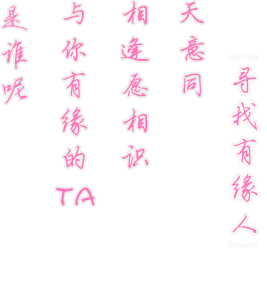
<style>
.page{position:relative;width:267px;height:297px;background:#ffffff}
.page>*{position:absolute;margin:0}
.t1{font:30px/36px "QXyingbixing";color:#ff75ba}
.t2{font:30px/36px "FZKATJW--GB1-0";color:#ff75ba}
</style>
<div class="page">
<p class="t1" style="left:2px;top:5px;width:25px;height:99px;text-align:center">是<br>谁<br>呢</p>
<p class="t1" style="left:56px;top:2px;width:39px;height:204px;text-align:center">与<br>你<br>有<br>缘<br>的<br><span class="t2">ta</span></p>
<p class="t1" style="left:121px;top:1px;width:29px;height:168px;text-align:center">相<br>逢<br>愿<br>相<br>识</p>
<p class="t1" style="left:180px;top:1px;width:25px;height:96px;text-align:center">天<br>意<br>同</p>
<p class="t1" style="left:231px;top:67px;width:27px;height:166px;text-align:center">寻<br>找<br>有<br>缘<br>人</p>
</div>
